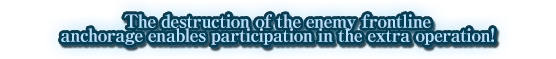
<style>
.page{position:relative;width:556px;height:59px;background:#ffffff}
.page>*{position:absolute;margin:0}
.t1{font:18px/14px "RyuminPro-ExBold";letter-spacing:-0.04em;color:#b9e0ff}
</style>
<div class="page">
<p class="t1" style="left:61px;top:14px;width:433px;height:31px;text-align:center">The destruction of the enemy frontline<br>anchorage enables participation in the extra operation!</p>
</div>
